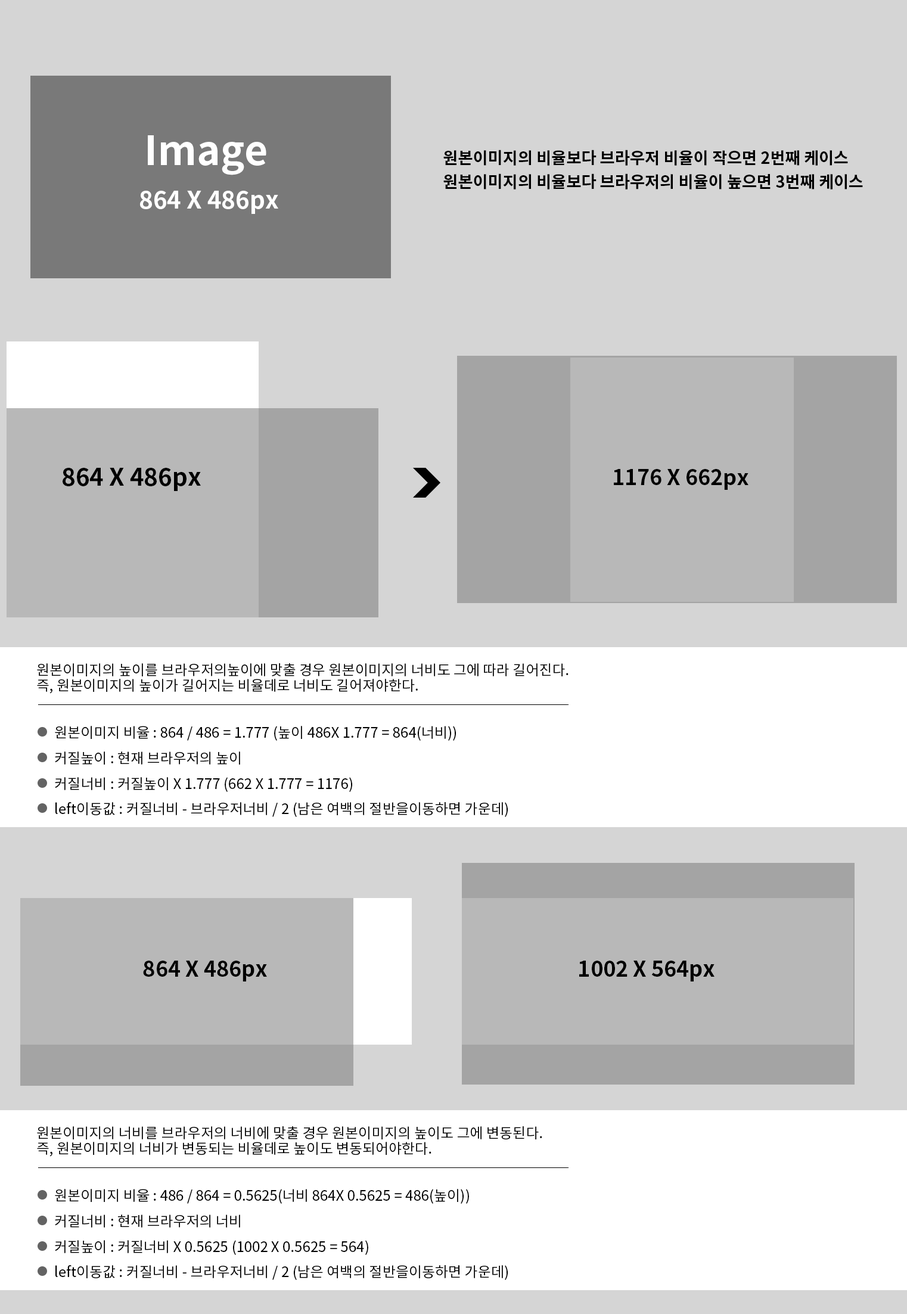
<style>
.page{position:relative;width:907px;height:1314px;background:#d5d5d5}
.page>*{position:absolute;margin:0}
.t1{font:40.4px "NotoSansCJKkr-Bold";color:#ffffff}
.t2{font:16.3px/23.7px "NotoSansCJKkr-Bold";color:#000000}
.t3{font:24px "NotoSansCJKkr-Bold";color:#ffffff}
.t4{font:24px "NotoSansCJKkr-Bold";color:#000000}
.t5{font:21.3px "NotoSansCJKkr-Bold";color:#000000}
.t6{font:14.3px/15.4px "NotoSansCJKkr-Regular";color:#000000}
.t7{font:14.3px "NotoSansCJKkr-Regular";color:#000000}
.t8{font:21.4px "NotoSansCJKkr-Bold";color:#000000}
</style>
<div class="page">
<p class="t1" style="left:148px;top:135px;width:118px;height:40px">Image</p>
<p class="t2" style="left:443px;top:150px;width:420px;height:40px">원본이미지의 비율보다 브라우저 비율이 작으면 2번째 케이스<br>원본이미지의 비율보다 브라우저의 비율이 높으면 3번째 케이스</p>
<p class="t3" style="left:140px;top:191px;width:138px;height:23px">864 X 486px</p>
<p class="t4" style="left:63px;top:468px;width:138px;height:23px">864 X 486px</p>
<p class="t5" style="left:614px;top:469px;width:135px;height:21px">1176 X 662px</p>
<p class="t6" style="left:37px;top:663px;width:532px;height:31px">원본이미지의 높이를 브라우저의높이에 맞출 경우 원본이미지의 너비도 그에 따라 길어진다.<br>즉, 원본이미지의 높이가 길어지는 비율데로 너비도 길어져야한다.</p>
<p class="t7" style="left:55px;top:726px;width:402px;height:15px">원본이미지 비율 : 864 / 486 = 1.777 (높이 486X 1.777 = 864(너비))</p>
<p class="t7" style="left:55px;top:752px;width:185px;height:13px">커질높이 : 현재 브라우저의 높이</p>
<p class="t7" style="left:55px;top:777px;width:298px;height:15px">커질너비 : 커질높이 X 1.777 (662 X 1.777 = 1176)</p>
<p class="t7" style="left:55px;top:802px;width:453px;height:15px">left이동값 : 커질너비 - 브라우저너비 / 2 (남은 여백의 절반을이동하면 가운데)</p>
<p class="t8" style="left:143px;top:961px;width:124px;height:21px">864 X 486px</p>
<p class="t8" style="left:579px;top:961px;width:136px;height:21px">1002 X 564px</p>
<p class="t6" style="left:37px;top:1127px;width:505px;height:30px">원본이미지의 너비를 브라우저의 너비에 맞출 경우 원본이미지의 높이도 그에 변동된다.<br>즉, 원본이미지의 너비가 변동되는 비율데로 높이도 변동되어야한다.</p>
<p class="t7" style="left:55px;top:1189px;width:414px;height:15px">원본이미지 비율 : 486 / 864 = 0.5625(너비 864X 0.5625 = 486(높이))</p>
<p class="t7" style="left:55px;top:1215px;width:185px;height:13px">커질너비 : 현재 브라우저의 너비</p>
<p class="t7" style="left:55px;top:1240px;width:313px;height:15px">커질높이 : 커질너비 X 0.5625 (1002 X 0.5625 = 564)</p>
<p class="t7" style="left:55px;top:1265px;width:453px;height:15px">left이동값 : 커질너비 - 브라우저너비 / 2 (남은 여백의 절반을이동하면 가운데)</p>
</div>
